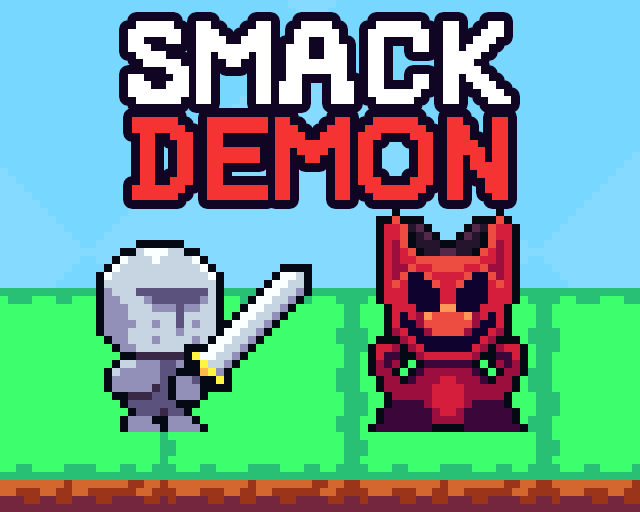
<style>
.page{position:relative;width:640px;height:512px}
.page>*{position:absolute;margin:0}
.t1{font:120px/96px "PeaberryBase";color:#ffffff}
.t2{font:120px/96px "PeaberryBase";color:#f53333}
</style>
<div class="page">
<p class="t1" style="left:128px;top:21px;width:383px;height:179px;text-align:center">SMACK<br><span class="t2">DEMON</span></p>
</div>
